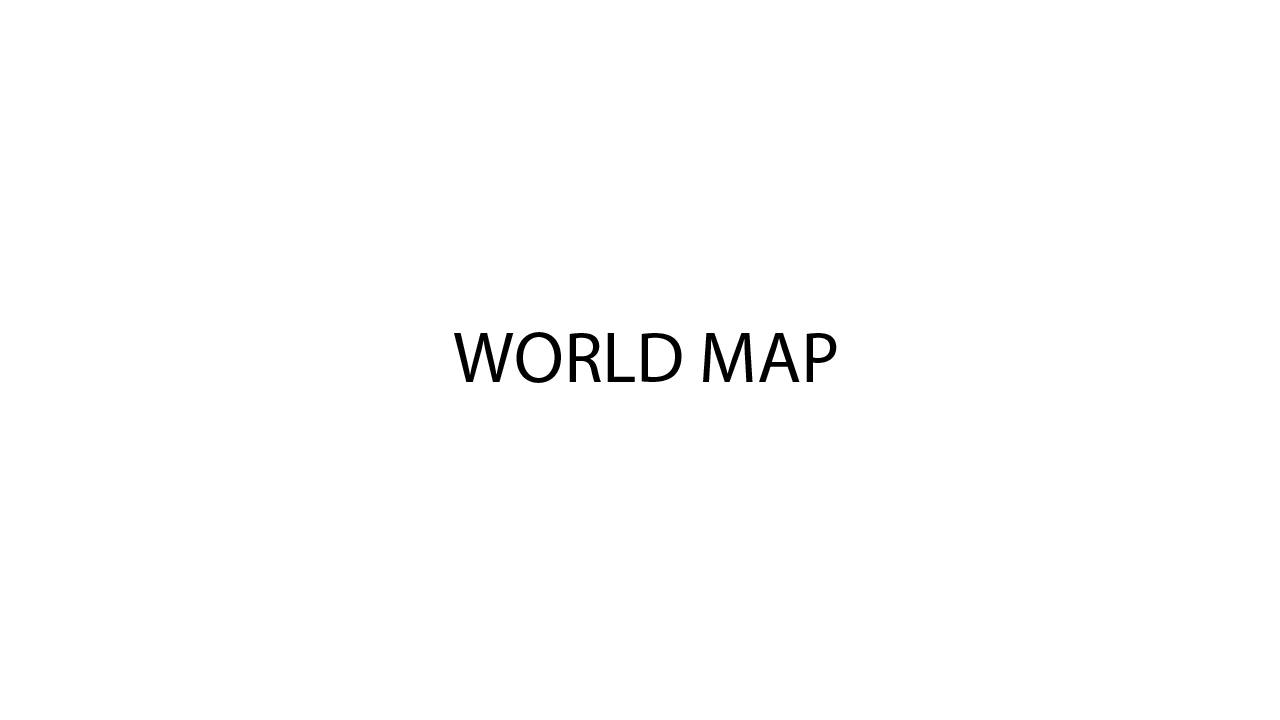
<style>
.page{position:relative;width:1280px;height:720px;background:#ffffff}
.page>*{position:absolute;margin:0}
.t1{font:72px "MyriadPro-Regular";color:#000000}
</style>
<div class="page">
<p class="t1" style="left:454px;top:332px;width:383px;height:51px">WORLD MAP</p>
</div>
